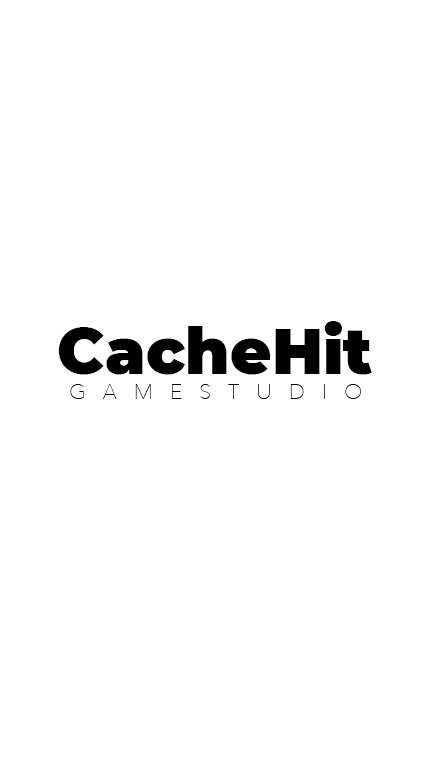
<style>
.page{position:relative;width:432px;height:768px;background:#ffffff}
.page>*{position:absolute;margin:0}
.t1{font:63.5px "Montserrat-Black";color:#000000}
.t2{font:21.2px "AvenirNext-UltraLight";letter-spacing:0.8em;color:#000000}
</style>
<div class="page">
<p class="t1" style="left:58px;top:321px;width:314px;height:54px">CacheHit</p>
<p class="t2" style="left:70px;top:384px;width:291px;height:15px">GAMESTUDIO</p>
</div>
